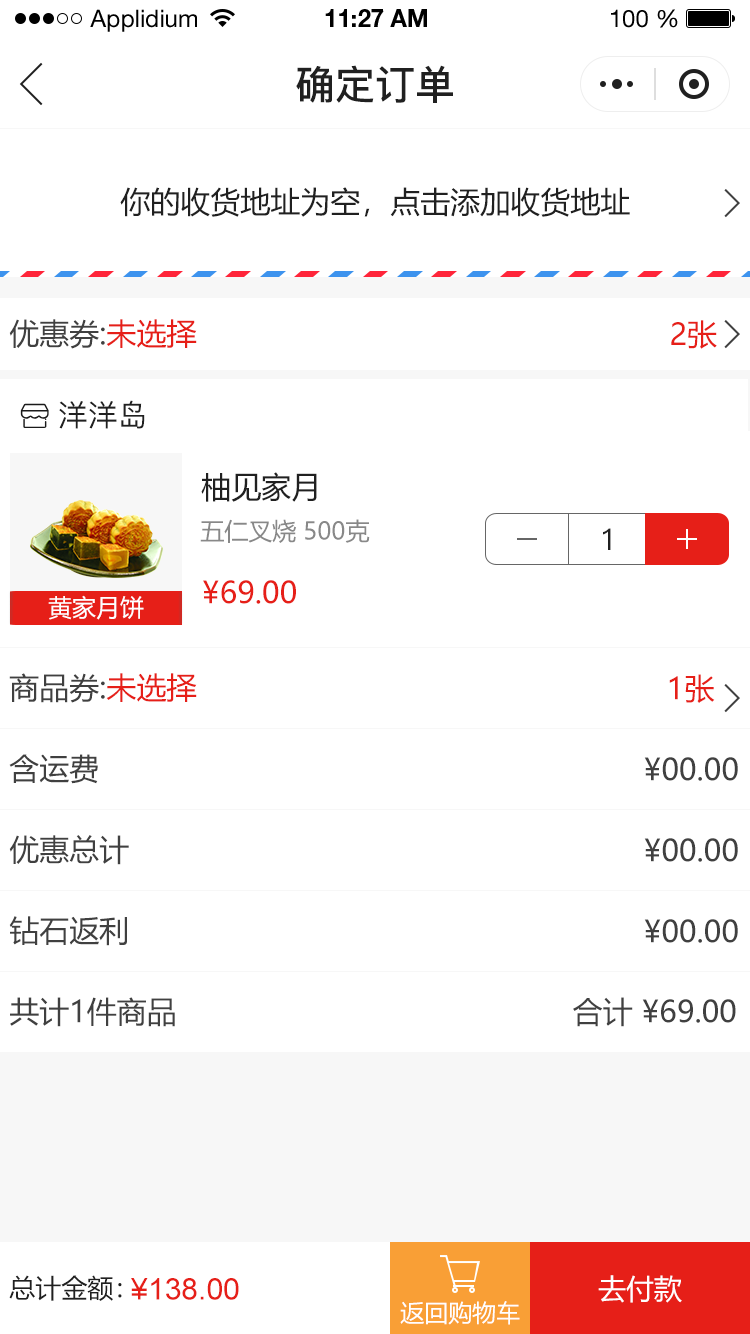
<style>
.page{position:relative;width:750px;height:1334px;background:#ffffff}
.page>*{position:absolute;margin:0}
.t1{font:24px "HelveticaNeueLTStd-Roman";color:#000000}
.t2{font:24px "HelveticaNeueLTStd-Bd";color:#000000}
.t3{font:40px "PingFang-SC-Bold";color:#202020;text-transform:uppercase}
.t4{font:30px "MicrosoftYaHei";color:#202020;text-transform:uppercase}
.t5{font:30px "MicrosoftYaHei";color:#404040;text-transform:uppercase}
.t6{font:30px "MicrosoftYaHei";color:#e61f18;text-transform:uppercase}
.t7{font:30px "PingFang-SC-Medium";color:#202020;text-transform:uppercase}
.t8{font:24px "MicrosoftYaHei";color:#888888;text-transform:uppercase}
.t9{font:24px "MicrosoftYaHei";color:#ffffff;text-transform:uppercase}
.t10{font:26px "MicrosoftYaHei";color:#202020;text-transform:uppercase}
.t11{font:30px "ArialMT";color:#e61f18;text-transform:uppercase}
.t12{font:28px "MicrosoftYaHei";color:#fffefe;text-transform:uppercase}
.t13{font:24px "MicrosoftYaHei";color:#fffefe;text-transform:uppercase}
</style>
<div class="page">
<p class="t1" style="left:90px;top:9px;width:107px;height:23px">Applidium</p>
<p class="t2" style="left:325px;top:9px;width:102px;height:18px">11:27 AM</p>
<p class="t1" style="left:611px;top:9px;width:67px;height:19px">100 %</p>
<p class="t3" style="left:296px;top:65px;width:157px;height:38px">确定订单</p>
<p class="t4" style="left:120px;top:187px;width:510px;height:30px">你的收货地址为空，点击添加收货地址</p>
<p class="t5" style="left:9px;top:319px;width:188px;height:30px">优惠券:<span class="t6">未选择</span></p>
<p class="t6" style="left:671px;top:320px;width:46px;height:29px">2张</p>
<p class="t7" style="left:59px;top:400px;width:86px;height:29px">洋洋岛</p>
<p class="t4" style="left:201px;top:472px;width:116px;height:30px">柚见家月</p>
<p class="t8" style="left:200px;top:519px;width:170px;height:24px">五仁叉烧 500克</p>
<p class="t7" style="left:603px;top:528px;width:8px;height:22px">1</p>
<p class="t6" style="left:203px;top:580px;width:93px;height:24px">¥69.00</p>
<p class="t9" style="left:48px;top:595px;width:96px;height:25px">黄家月饼</p>
<p class="t5" style="left:9px;top:673px;width:188px;height:30px">商品券:<span class="t6">未选择</span></p>
<p class="t6" style="left:669px;top:674px;width:46px;height:29px">1张</p>
<p class="t5" style="left:9px;top:754px;width:89px;height:30px">含运费</p>
<p class="t5" style="left:644px;top:757px;width:94px;height:24px">¥00.00</p>
<p class="t5" style="left:9px;top:835px;width:120px;height:30px">优惠总计</p>
<p class="t5" style="left:644px;top:838px;width:94px;height:24px">¥00.00</p>
<p class="t5" style="left:9px;top:916px;width:118px;height:30px">钻石返利</p>
<p class="t5" style="left:644px;top:919px;width:94px;height:24px">¥00.00</p>
<p class="t5" style="left:10px;top:997px;width:165px;height:30px">共计1件商品</p>
<p class="t5" style="left:573px;top:997px;width:163px;height:30px">合计 ¥69.00</p>
<p class="t10" style="left:9px;top:1275px;width:113px;height:26px">总计金额：</p>
<p class="t11" style="left:131px;top:1278px;width:108px;height:22px">¥138.00</p>
<p class="t12" style="left:598px;top:1275px;width:84px;height:28px">去付款</p>
<p class="t13" style="left:400px;top:1301px;width:120px;height:24px">返回购物车</p>
</div>
